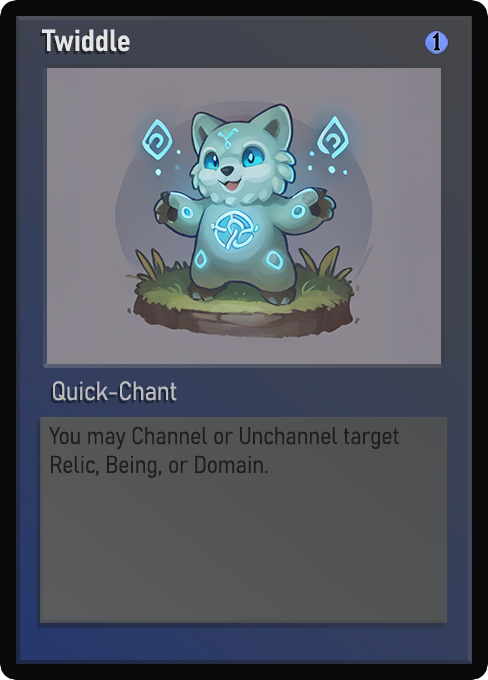
<style>
.page{position:relative;width:488px;height:680px}
.page>*{position:absolute;margin:0}
.t1{font:30px "Bahnschrift-SemiBoldSemiCondensed";color:#f2f2f2;font-weight:bold}
.t2{font:25px "WTRRoycroft";color:#000000;font-weight:bold;scale:1.09 1}
.t3{font:26px "Bahnschrift-LightSemiCondensed";color:#c8c8c8;font-weight:bold}
.t4{font:24px "Bahnschrift-LightSemiCondensed";color:#1e1e1e;font-weight:bold}
</style>
<div class="page">
<p class="t1" style="left:42px;top:29px;width:88px;height:23px;opacity:0.9">Twiddle</p>
<p class="t2" style="left:432px;top:32px;width:9px;height:19px">1</p>
<p class="t3" style="left:53px;top:381px;width:124px;height:20px;opacity:0.9">Quick-Chant</p>
<p class="t4" style="left:49px;top:426px;width:350px;height:52px">You may Channel or Unchannel target Relic, Being, or Domain.</p>
</div>
